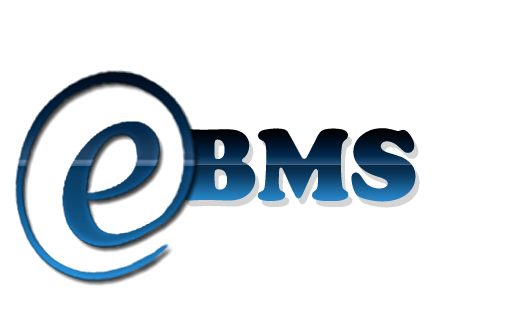
<style>
.page{position:relative;width:527px;height:335px;background:#ffffff}
.page>*{position:absolute;margin:0}
.t1{font:105.3px "CooperBlack"}
</style>
<div class="page">
<p class="t1" style="left:182px;top:128px;width:234px;height:74px">BMS</p>
</div>
